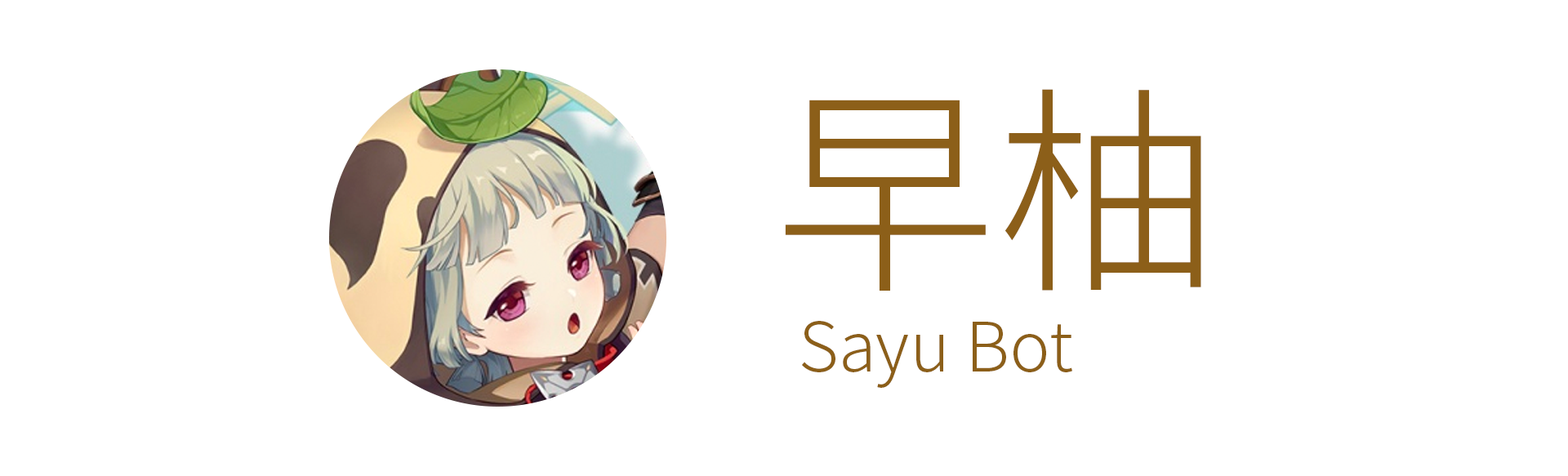
<style>
.page{position:relative;width:1568px;height:476px;background:#ffffff}
.page>*{position:absolute;margin:0}
.t1{font:222.1px "NotoSansCJKtc-Light";color:#8c5f19}
.t2{font:68.5px "NotoSansCJKtc-Light";color:#8c5f19}
</style>
<div class="page">
<p class="t1" style="left:785px;top:89px;width:416px;height:202px">早柚</p>
<p class="t2" style="left:802px;top:321px;width:270px;height:67px">Sayu Bot</p>
</div>
